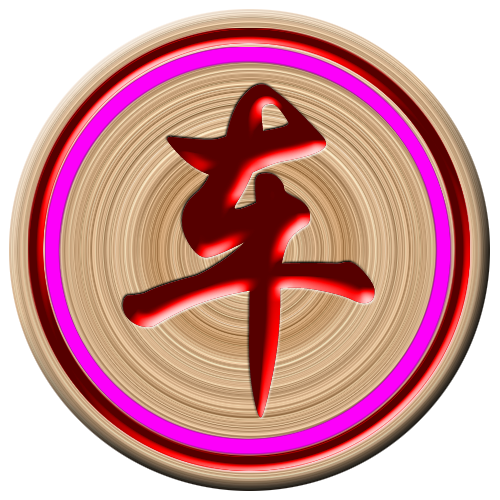
<style>
.page{position:relative;width:500px;height:500px;background:#ffffff}
.page>*{position:absolute;margin:0}
.t1{font:360px "STXingkai"}
</style>
<div class="page">
<p class="t1" style="left:123px;top:84px;width:252px;height:334px">车</p>
</div>
